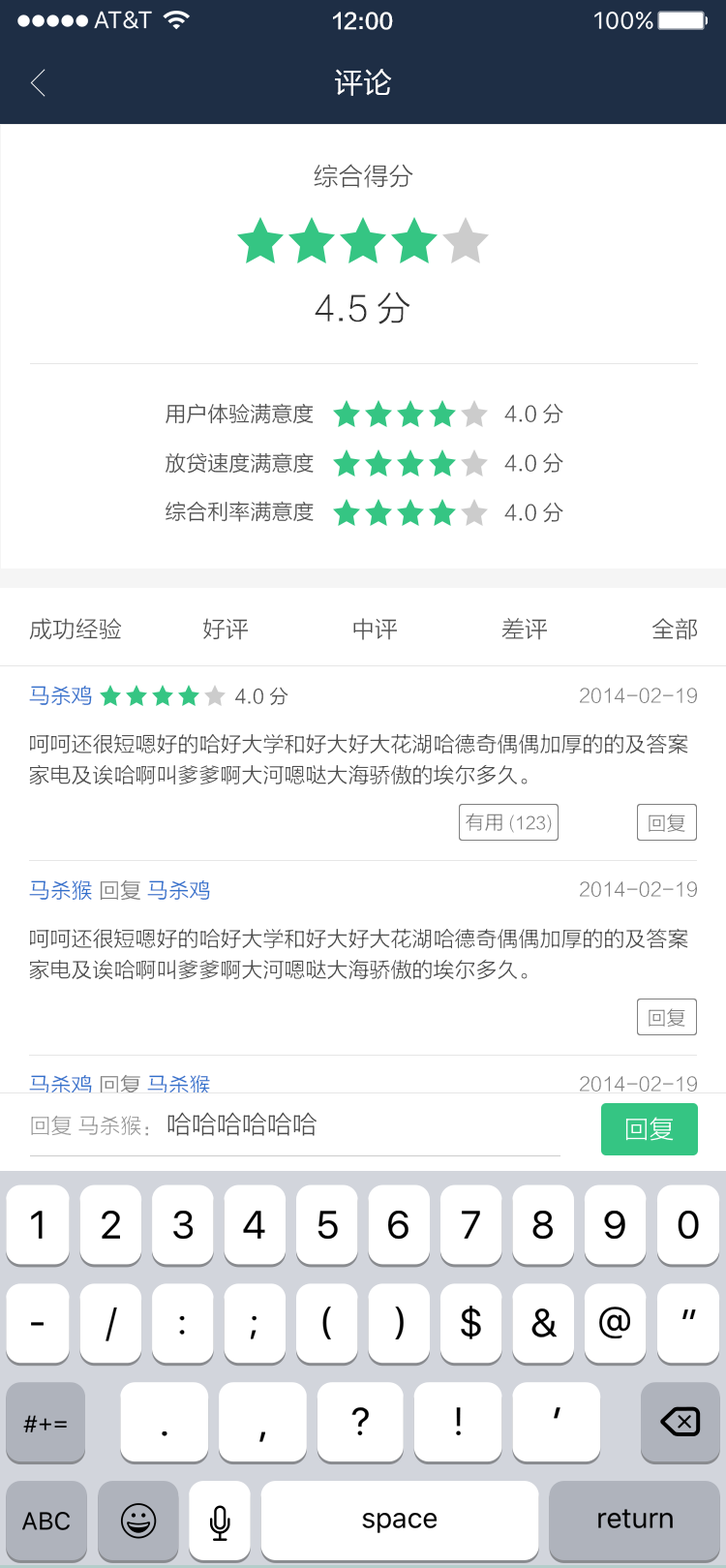
<style>
.page{position:relative;width:726px;height:1568px;background:#ffffff}
.page>*{position:absolute;margin:0}
.t1{font:21.3px "FZLTZHK--GBK1-0";color:#ffffff}
.t2{font:29.1px "FZLTHJW--GB1-0";color:#ffffff}
.t3{font:25.2px "FZLTXHK";color:#4d4d4d}
.t4{font:34.9px "FZLTXHK";color:#333333}
.t5{font:21.3px "FZLTXHK";color:#4d4d4d}
.t6{font:21.4px "FZLTXHK";color:#4d4d4d}
.t7{font:23.2px "FZLTXHK";color:#4d4d4d}
.t8{font:21.3px "FZLTXHK";color:#3170cc}
.t9{font:19.4px "FZLTXHK";color:#4d4d4d}
.t10{font:19.4px "FZLTXHK";color:#808080}
.t11{font:21.3px/31px "FZLTXHK";color:#4d4d4d}
.t12{font:17.4px "FZLTXHK";color:#808080}
.t13{font:21.3px "FZLTXHK";color:#808080}
.t14{font:21.3px "FZLTXHK";color:#999999}
.t15{font:25.2px "FZLTXHK";color:#ffffff}
.t16{font:39px "SFUIDisplay-Regular";color:#000000}
.t17{font:43.4px "SFUIDisplay-Regular";color:#000000}
.t18{font:23.5px "SFUIText-Regular";letter-spacing:-0.01em;color:#000000}
.t19{font:24.7px "SFUIText-Regular";letter-spacing:-0.01em;color:#000000}
.t20{font:28.2px "SFUIText-Regular";letter-spacing:-0.02em;color:#000000}
</style>
<div class="page">
<p class="t1" style="left:333px;top:12px;width:60px;height:18px">12:00</p>
<p class="t2" style="left:335px;top:69px;width:57px;height:27px">评论</p>
<p class="t3" style="left:314px;top:164px;width:100px;height:24px">综合得分</p>
<p class="t4" style="left:315px;top:292px;width:96px;height:32px">4.5分</p>
<p class="t5" style="left:166px;top:403px;width:148px;height:21px">用户体验满意度</p>
<p class="t5" style="left:505px;top:403px;width:59px;height:21px">4.0分</p>
<p class="t6" style="left:166px;top:452px;width:148px;height:22px">放贷速度满意度</p>
<p class="t5" style="left:505px;top:452px;width:59px;height:22px">4.0分</p>
<p class="t6" style="left:166px;top:501px;width:148px;height:21px">综合利率满意度</p>
<p class="t5" style="left:505px;top:502px;width:59px;height:21px">4.0分</p>
<p class="t7" style="left:29px;top:618px;width:93px;height:22px">成功经验</p>
<p class="t7" style="left:203px;top:618px;width:45px;height:22px">好评</p>
<p class="t7" style="left:354px;top:618px;width:43px;height:22px">中评</p>
<p class="t7" style="left:502px;top:618px;width:45px;height:22px">差评</p>
<p class="t7" style="left:653px;top:618px;width:45px;height:22px">全部</p>
<p class="t8" style="left:29px;top:686px;width:63px;height:19px">马杀鸡</p>
<p class="t9" style="left:234px;top:687px;width:55px;height:19px">4.0分</p>
<p class="t10" style="left:580px;top:688px;width:117px;height:15px">2014-02-19</p>
<p class="t11" style="left:29px;top:733px;width:660px;height:52px">呵呵还很短嗯好的哈好大学和好大好大花湖哈德奇偶偶加厚的的及答案<br>家电及诶哈啊叫爹爹啊大河嗯哒大海骄傲的埃尔多久。</p>
<p class="t12" style="left:466px;top:813px;width:86px;height:20px"><span class="t10">有用</span>(123)</p>
<p class="t10" style="left:649px;top:814px;width:37px;height:18px">回复</p>
<p class="t8" style="left:29px;top:879px;width:63px;height:22px">马杀猴</p>
<p class="t13" style="left:100px;top:879px;width:40px;height:22px">回复</p>
<p class="t8" style="left:147px;top:880px;width:63px;height:20px">马杀鸡</p>
<p class="t10" style="left:580px;top:881px;width:117px;height:16px">2014-02-19</p>
<p class="t11" style="left:29px;top:928px;width:660px;height:52px">呵呵还很短嗯好的哈好大学和好大好大花湖哈德奇偶偶加厚的的及答案<br>家电及诶哈啊叫爹爹啊大河嗯哒大海骄傲的埃尔多久。</p>
<p class="t10" style="left:649px;top:1008px;width:37px;height:19px">回复</p>
<p class="t8" style="left:29px;top:1075px;width:63px;height:19px">马杀鸡</p>
<p class="t13" style="left:100px;top:1074px;width:40px;height:21px">回复</p>
<p class="t8" style="left:147px;top:1074px;width:63px;height:21px">马杀猴</p>
<p class="t10" style="left:580px;top:1076px;width:117px;height:15px">2014-02-19</p>
<p class="t14" style="left:31px;top:1115px;width:117px;height:21px">回复 马杀猴：</p>
<p class="t3" style="left:168px;top:1112px;width:149px;height:24px">哈哈哈哈哈哈</p>
<p class="t15" style="left:626px;top:1117px;width:48px;height:24px">回复</p>
<p class="t16" style="left:31px;top:1211px;width:12px;height:28px">1</p>
<p class="t16" style="left:102px;top:1211px;width:18px;height:28px">2</p>
<p class="t16" style="left:173px;top:1211px;width:20px;height:28px">3</p>
<p class="t16" style="left:243px;top:1211px;width:22px;height:28px">4</p>
<p class="t16" style="left:318px;top:1211px;width:20px;height:28px">5</p>
<p class="t16" style="left:388px;top:1211px;width:21px;height:28px">6</p>
<p class="t16" style="left:462px;top:1211px;width:18px;height:28px">7</p>
<p class="t16" style="left:533px;top:1211px;width:20px;height:28px">8</p>
<p class="t16" style="left:604px;top:1211px;width:22px;height:28px">9</p>
<p class="t16" style="left:678px;top:1211px;width:21px;height:28px">0</p>
<p class="t16" style="left:106px;top:1307px;width:11px;height:34px">/</p>
<p class="t16" style="left:323px;top:1307px;width:8px;height:32px">(</p>
<p class="t16" style="left:395px;top:1307px;width:9px;height:32px">)</p>
<p class="t16" style="left:461px;top:1306px;width:20px;height:33px">$</p>
<p class="t16" style="left:532px;top:1308px;width:25px;height:29px">&amp;</p>
<p class="t16" style="left:600px;top:1307px;width:30px;height:31px">@</p>
<p class="t16" style="left:683px;top:1309px;width:13px;height:10px">”</p>
<p class="t16" style="left:31px;top:1322px;width:13px;height:4px">-</p>
<p class="t16" style="left:179px;top:1316px;width:6px;height:19px">:</p>
<p class="t16" style="left:251px;top:1316px;width:6px;height:23px">;</p>
<p class="t16" style="left:352px;top:1407px;width:17px;height:28px">?</p>
<p class="t16" style="left:456px;top:1407px;width:5px;height:28px">!</p>
<p class="t17" style="left:554px;top:1407px;width:7px;height:12px">’</p>
<p class="t18" style="left:23px;top:1415px;width:44px;height:17px">#+=</p>
<p class="t17" style="left:162px;top:1431px;width:6px;height:5px">.</p>
<p class="t17" style="left:260px;top:1431px;width:5px;height:11px">,</p>
<p class="t19" style="left:22px;top:1512px;width:48px;height:18px">ABC</p>
<p class="t20" style="left:362px;top:1513px;width:75px;height:20px">space</p>
<p class="t20" style="left:599px;top:1509px;width:74px;height:19px">return</p>
</div>
